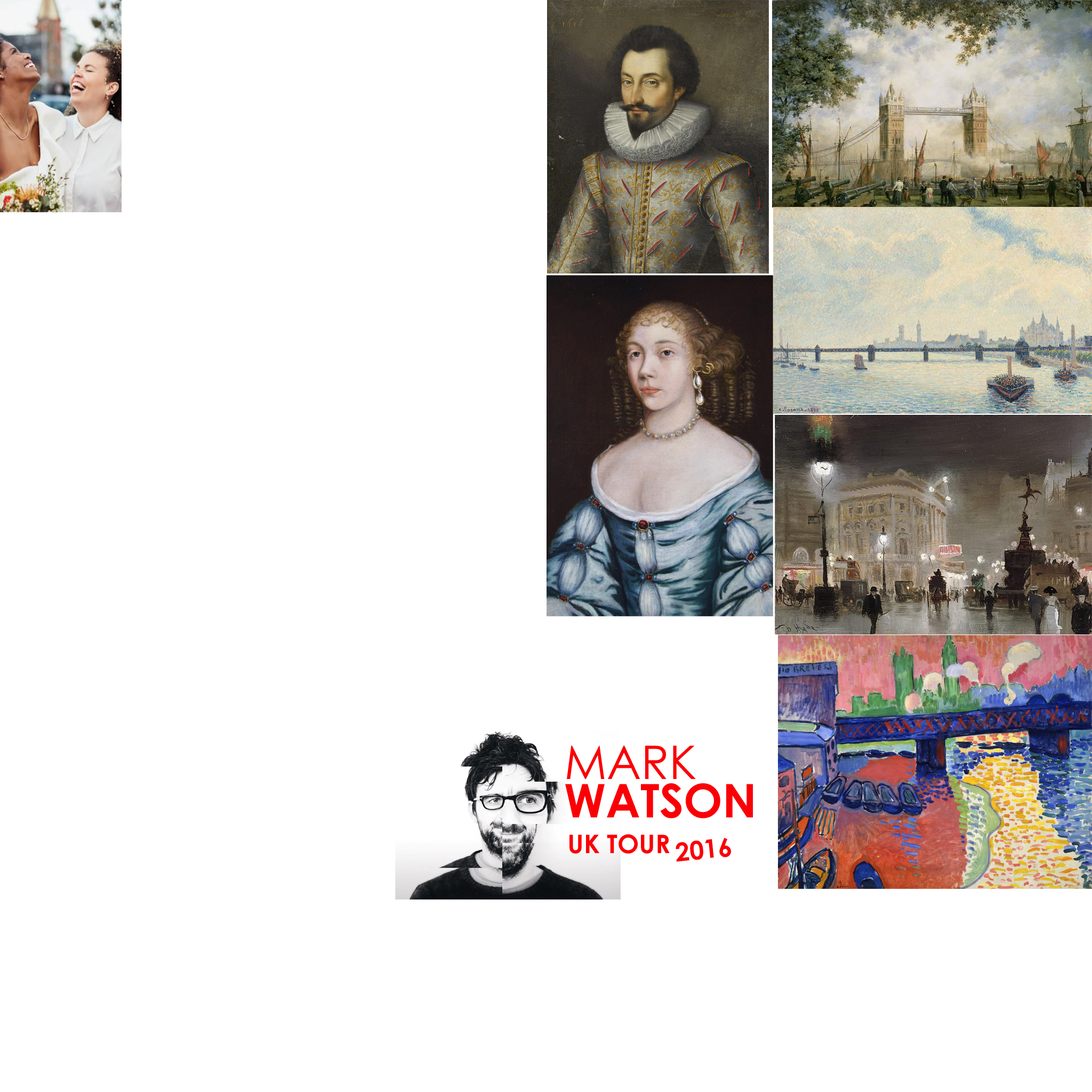
<style>
.page{position:relative;width:1092px;height:1092px;background:#ffffff}
.page>*{position:absolute;margin:0}
.t1{font:46.4px/38.4px "CenturyGothic-Bold";color:#fa0006}
.t2{font:46.4px/38.4px "CenturyGothic";color:#fa0006}
.t3{font:25.6px "CenturyGothic-Bold";color:#fa0006}
</style>
<div class="page">
<p class="t1" style="left:565px;top:745px;width:188px;height:73px"><span class="t2">MARK<br></span>WATSON</p>
<p class="t3" style="left:569px;top:834px;width:101px;height:20px">UK TOUR</p>
<p class="t3" style="left:676px;top:838px;width:55px;height:24px;rotate:-6deg">2016</p>
</div>
